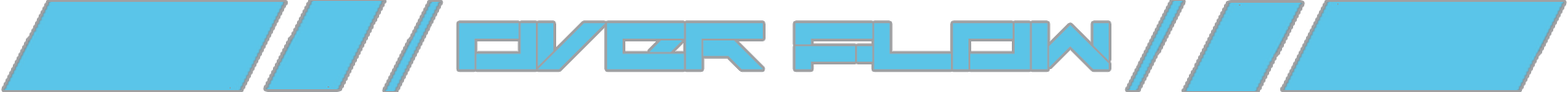
<style>
.page{position:relative;width:1568px;height:92px;background:#ffffff}
.page>*{position:absolute;margin:0}
.t1{font:61.5px "Darktech-LDR";color:#5bc4e7}
</style>
<div class="page">
<p class="t1" style="left:458px;top:23px;width:651px;height:47px">OVER FLOW</p>
</div>
